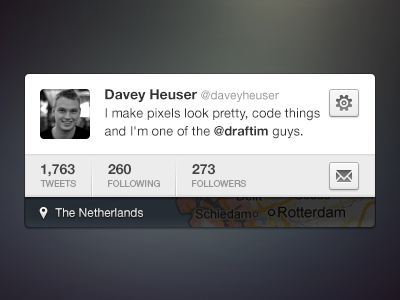
<style>
.page{position:relative;width:400px;height:300px}
.page>*{position:absolute;margin:0}
.t1{font:14px "HelveticaNeueLTStd-Bd";color:#333333}
.t2{font:12px "HelveticaNeueLTStd-Roman";color:#999999}
.t3{font:13px/18px "HelveticaNeueLTStd-Roman";color:#333333}
.t4{font:13px/18px "HelveticaNeueLTStd-Bd";color:#333333}
.t5{font:14px "HelveticaNeueLTStd-Bd";color:#444444}
.t6{font:9px "HelveticaNeueLTStd-Roman";color:#888888}
.t7{font:12px "HelveticaNeueLTStd-Roman";color:#e2e2e2}
</style>
<div class="page">
<p class="t1" style="left:105px;top:89px;width:174px;height:13px">Davey Heuser <span class="t2">@daveyheuser</span></p>
<p class="t3" style="left:105px;top:108px;width:215px;height:31px">I make pixels look pretty, code things and I'm one of the <span class="t4">@draftim</span> guys.</p>
<p class="t5" style="left:41px;top:164px;width:34px;height:13px">1,763</p>
<p class="t5" style="left:108px;top:164px;width:23px;height:11px">260</p>
<p class="t5" style="left:192px;top:164px;width:23px;height:11px">273</p>
<p class="t6" style="left:40px;top:180px;width:36px;height:7px;opacity:0.88">TWEETS</p>
<p class="t6" style="left:108px;top:180px;width:52px;height:7px;opacity:0.88">FOLLOWING</p>
<p class="t6" style="left:192px;top:180px;width:54px;height:7px;opacity:0.88">FOLLOWERS</p>
<p class="t7" style="left:55px;top:208px;width:88px;height:9px">The Netherlands</p>
</div>
